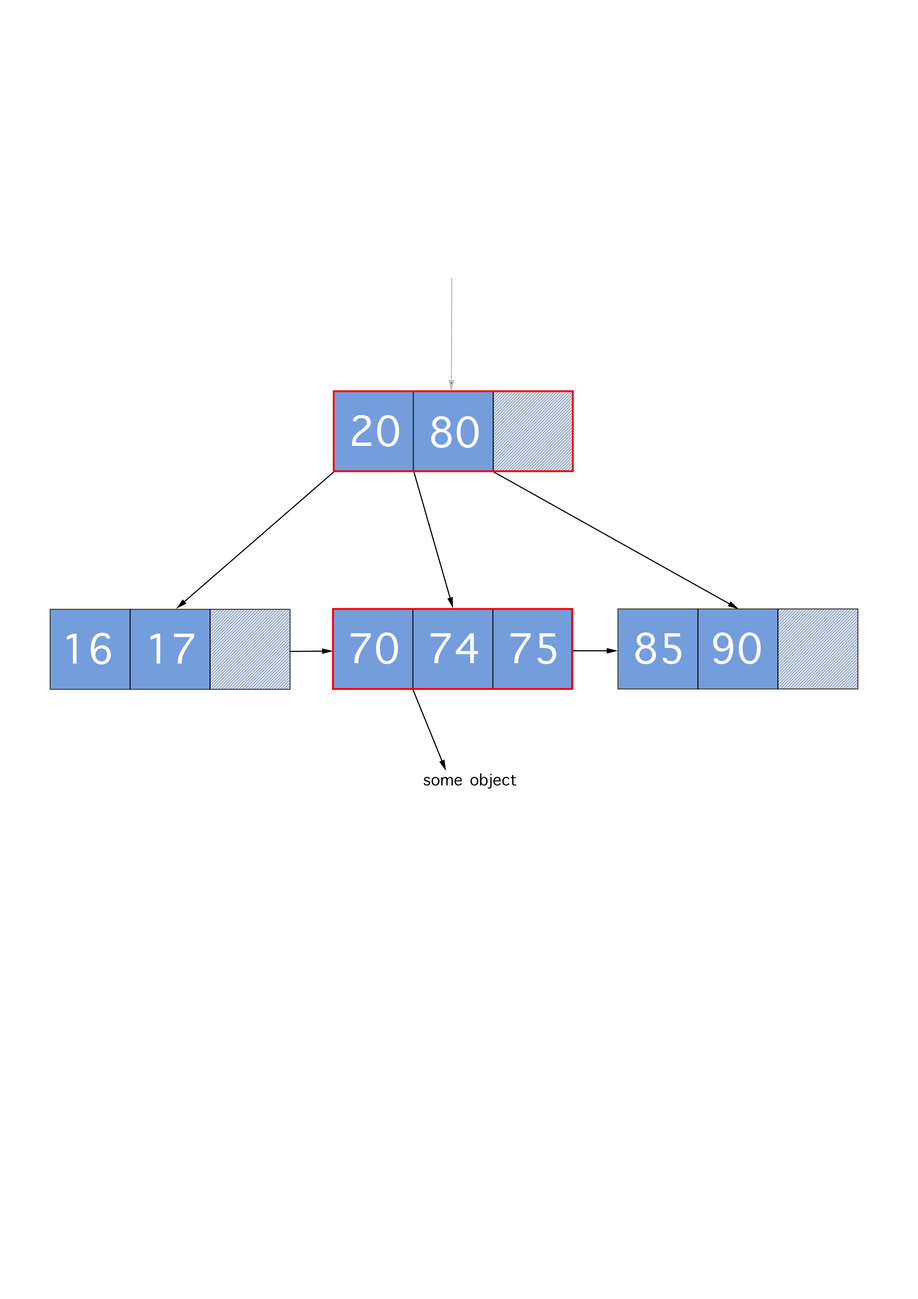
<style>
.page{position:relative;width:918px;height:1299px;background:#ffffff}
.page>*{position:absolute;margin:0}
.t1{font:55.5px "AppleSymbols";color:#ffffff}
.t2{font:21.6px "AppleSymbols";color:#000000}
</style>
<div class="page">
<p class="t1" style="left:352px;top:415px;width:47px;height:32px">20</p>
<p class="t1" style="left:431px;top:416px;width:48px;height:32px">80</p>
<p class="t1" style="left:67px;top:632px;width:44px;height:33px">16</p>
<p class="t1" style="left:150px;top:633px;width:44px;height:30px">17</p>
<p class="t1" style="left:351px;top:632px;width:47px;height:32px">70</p>
<p class="t1" style="left:431px;top:633px;width:47px;height:30px">74</p>
<p class="t1" style="left:511px;top:633px;width:45px;height:31px">75</p>
<p class="t1" style="left:635px;top:632px;width:47px;height:32px">85</p>
<p class="t1" style="left:713px;top:632px;width:48px;height:32px">90</p>
<p class="t2" style="left:424px;top:773px;width:92px;height:16px">some object</p>
</div>
